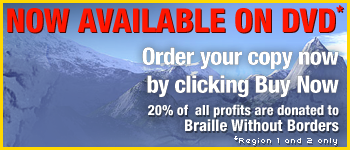
<style>
.page{position:relative;width:350px;height:150px}
.page>*{position:absolute;margin:0}
.t1{font:33px "HelveticaNeueLT-HeavyCond";color:#ff1500}
.t2{font:18px "HelveticaNeueLT-HeavyCond";color:#ff1500}
.t3{font:24px/28px "HelveticaNeueLT-HeavyCond";letter-spacing:-0.025em;color:#ffffff}
.t4{font:24px/28px "HelveticaNeueLT-HeavyCond";color:#ffffff}
.t5{font:14px/16px "HelveticaNeueLT-HeavyCond";color:#ffffff}
.t6{font:16px/16px "HelveticaNeueLT-HeavyCond";color:#ffffff}
.t7{font:8px "Uni0554";color:#ffffff}
.t8{font:6px "Uni0553";color:#ffffff}
</style>
<div class="page">
<p class="t1" style="left:7px;top:5px;width:337px;height:28px">NOW AVAILABLE ON DVD<span class="t2">*</span></p>
<p class="t1" style="left:8px;top:6px;width:337px;height:28px">NOW AVAILABLE ON DVD<span class="t2">*</span></p>
<p class="t3" style="left:142px;top:47px;width:197px;height:51px;text-align:right;opacity:0.38">Order your copy now <br>by clicking Buy Now</p>
<p class="t3" style="left:142px;top:47px;width:197px;height:51px;text-align:right;opacity:0.38">Order your copy now <br>by clicking Buy Now</p>
<p class="t3" style="left:142px;top:47px;width:197px;height:51px;text-align:right;opacity:0.38">Order your copy now <br>by clicking Buy Now</p>
<p class="t3" style="left:142px;top:47px;width:197px;height:51px;text-align:right"><span class="t4"> </span>Order your copy now <br>by clicking Buy Now</p>
<p class="t5" style="left:148px;top:104px;width:191px;height:28px;text-align:right">20% of  all profits are donated to<span class="t6"><br>Braille Without Borders</span></p>
<p class="t7" style="left:234px;top:136px;width:103px;height:9px"><span class="t8">*</span>Region 1 and 2 only</p>
</div>
